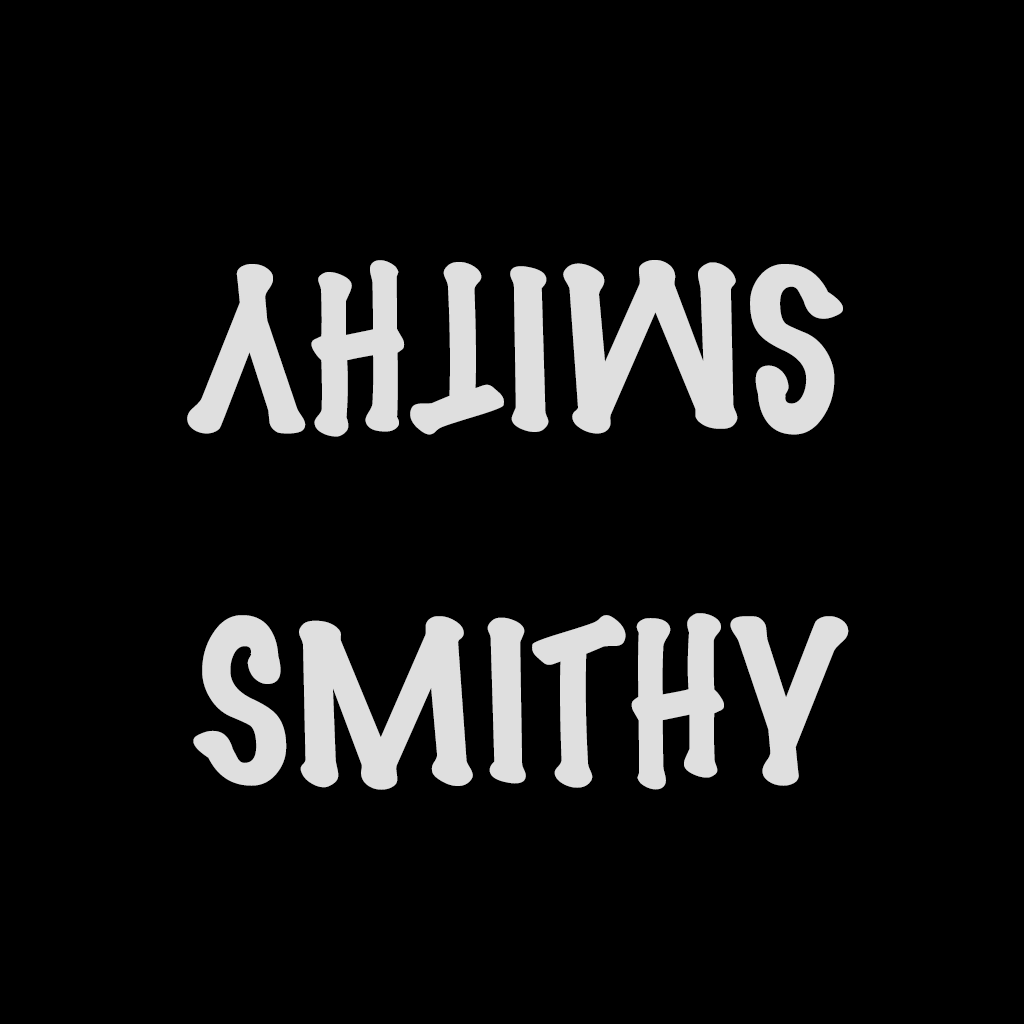
<style>
.page{position:relative;width:1024px;height:1024px;background:#000000}
.page>*{position:absolute;margin:0}
.t1{font:200px "MarkerFelt-Thin";color:#dfdfdf}
</style>
<div class="page">
<p class="t1" style="left:187px;top:260px;width:656px;height:177px;rotate:180deg">SMITHY</p>
<p class="t1" style="left:193px;top:613px;width:656px;height:177px">SMITHY</p>
</div>
